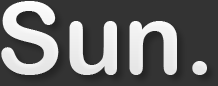
<style>
.page{position:relative;width:218px;height:86px;background:#333333}
.page>*{position:absolute;margin:0}
.t1{font:100px "ArialRoundedMTBold";color:#ffffff}
</style>
<div class="page">
<p class="t1" style="left:1px;top:1px;width:206px;height:74px">Sun.</p>
</div>
